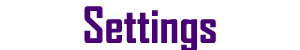
<style>
.page{position:relative;width:300px;height:50px;background:#ffffff}
.page>*{position:absolute;margin:0}
.t1{font:48px "AgencyFB-Bold";color:#480275}
</style>
<div class="page">
<p class="t1" style="left:84px;top:6px;width:132px;height:46px">Settings</p>
</div>
